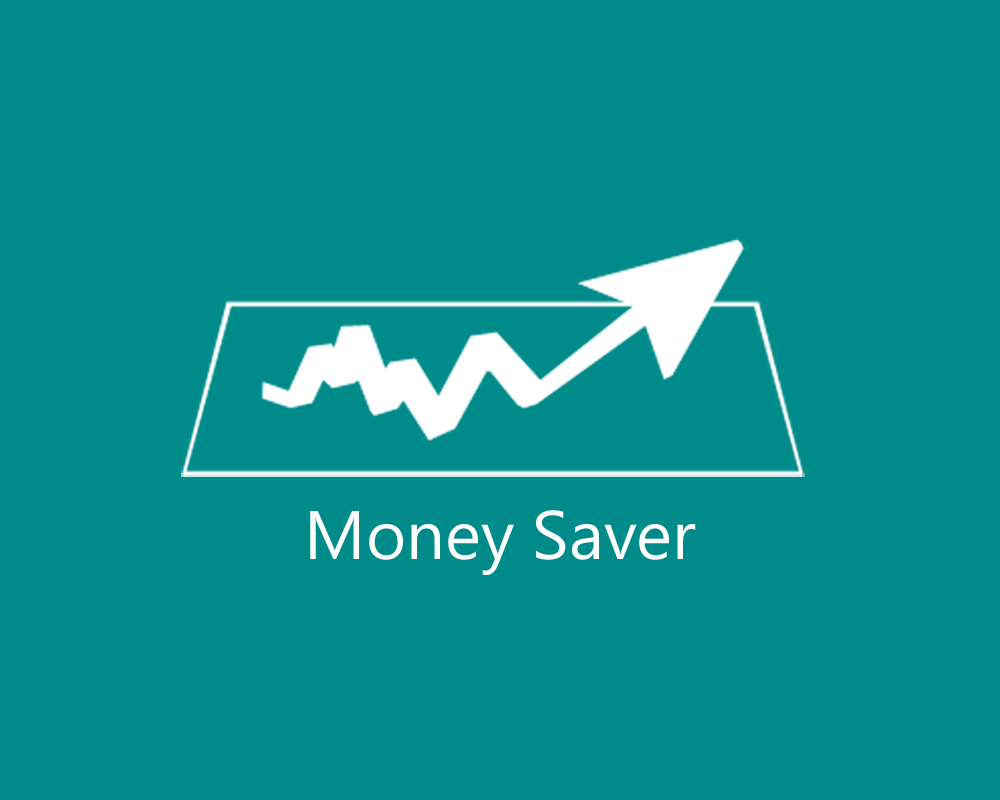
<style>
.page{position:relative;width:1000px;height:800px;background:#008b8b}
.page>*{position:absolute;margin:0}
.t1{font:68.6px "SegoeUI";color:#ffffff}
</style>
<div class="page">
<p class="t1" style="left:310px;top:510px;width:386px;height:65px">Money Saver</p>
</div>
